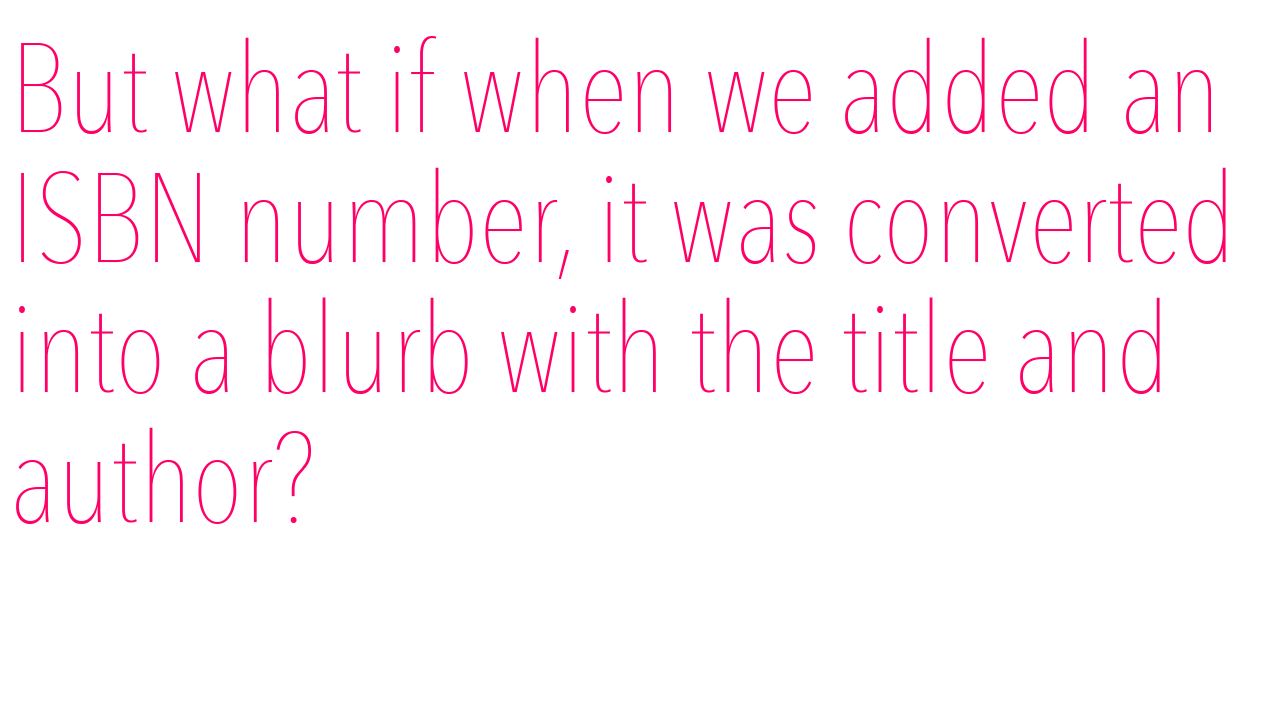
<style>
.page{position:relative;width:1280px;height:720px;background:#ffffff}
.page>*{position:absolute;margin:0}
.t1{font:125px "AvenirNextCondensed-UltraLight";color:#ff0066}
</style>
<div class="page">
<p class="t1" style="left:16px;top:36px;width:1210px;height:488px">But what if when we added an<br>ISBN number, it was converted <br>into a blurb with the title and<br>author?</p>
</div>
